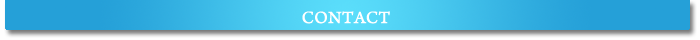
<style>
.page{position:relative;width:700px;height:40px;background:#25a0d8}
.page>*{position:absolute;margin:0}
.t1{font:18px "ArnoPro-Caption";color:#ffffff}
</style>
<div class="page">
<p class="t1" style="left:302px;top:11px;width:88px;height:13px">CONTACT</p>
</div>
